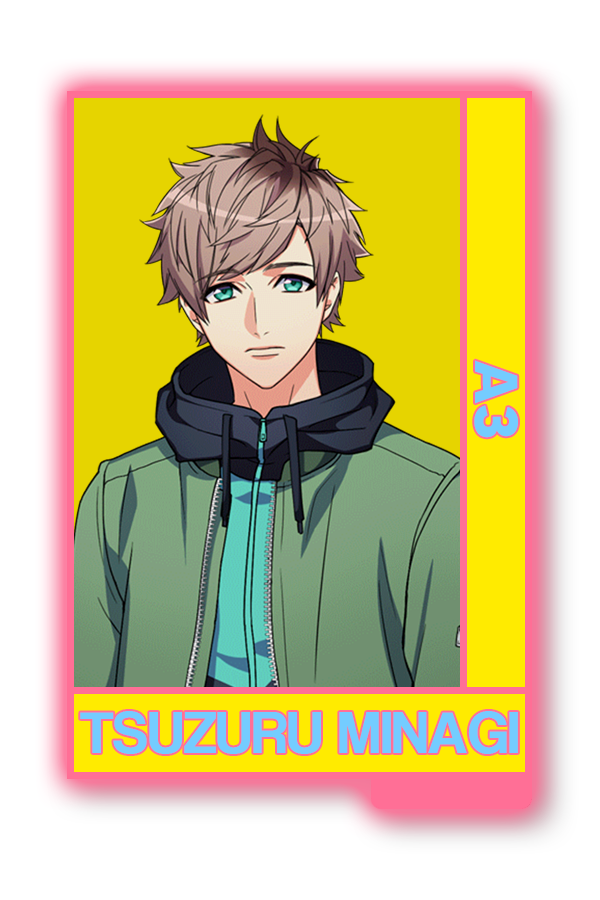
<style>
.page{position:relative;width:600px;height:900px;background:#ffffff}
.page>*{position:absolute;margin:0}
.t1{font:60.5px "MADETOMMY-Bold";color:#74ccff}
.t2{font:61.2px "CoolveticaRg-Regular";color:#74ccff}
</style>
<div class="page">
<p class="t1" style="left:474px;top:360px;width:44px;height:78px;rotate:90deg">A3</p>
<p class="t2" style="left:80px;top:711px;width:438px;height:43px">TSUZURU MINAGI</p>
</div>
